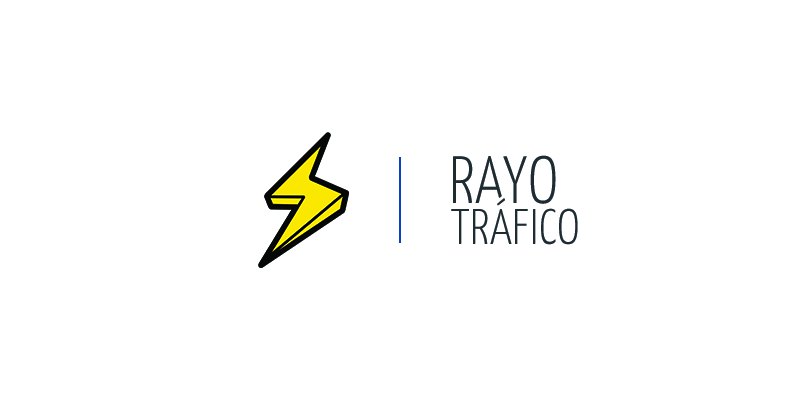
<style>
.page{position:relative;width:800px;height:400px;background:#ffffff}
.page>*{position:absolute;margin:0}
.t1{font:66.7px "YanoneKaffeesatz-Light";letter-spacing:0.02em;color:#1e2b31}
.t2{font:50px "YanoneKaffeesatz-Light";letter-spacing:0.02em;color:#1e2b31}
</style>
<div class="page">
<p class="t1" style="left:453px;top:155px;width:103px;height:49px">RAYO</p>
<p class="t2" style="left:451px;top:198px;width:127px;height:47px">TRÁFICO</p>
</div>
